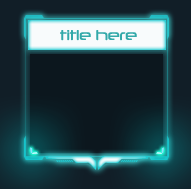
<style>
.page{position:relative;width:191px;height:189px;background:#0c171e}
.page>*{position:absolute;margin:0}
.t1{font:13.6px "Neuropol-Regular";color:#33a9a9}
</style>
<div class="page">
<p class="t1" style="left:60px;top:30px;width:77px;height:11px">title here</p>
</div>
